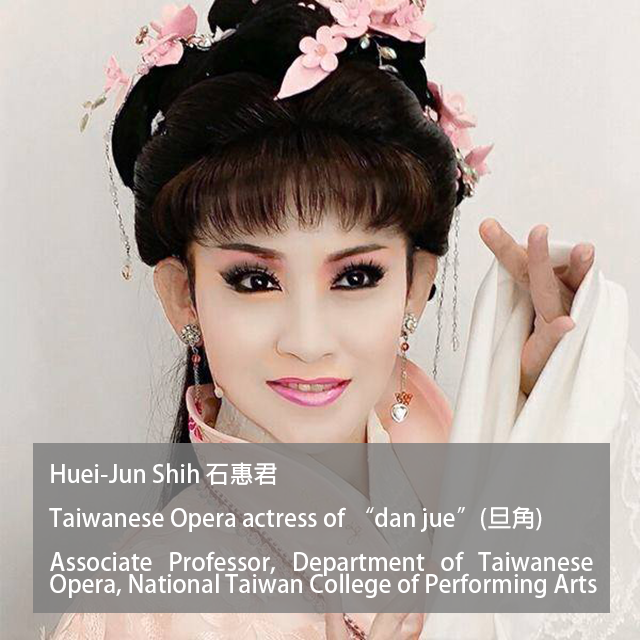
<style>
.page{position:relative;width:640px;height:640px}
.page>*{position:absolute;margin:0}
.t1{font:24px/22px "AdobeFanHeitiStd-Bold";color:#ffffff}
</style>
<div class="page">
<p class="t1" style="left:49px;top:462px;width:548px;height:136px;text-align:justify">Huei-Jun Shih 石惠君<br><br>Taiwanese Opera actress of “dan jue”(旦角)<br><br>Associate Professor, Department of Taiwanese Opera, National Taiwan College of Performing Arts</p>
</div>
